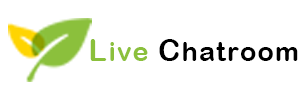
<style>
.page{position:relative;width:300px;height:100px;background:#ffffff}
.page>*{position:absolute;margin:0}
.t1{font:26.7px "ArialRoundedMTBold";letter-spacing:0.05em;color:#000000}
.t2{font:30px "ArialRoundedMTBold";letter-spacing:0.05em;color:#8bc03c}
.t3{font:26.7px "ArialRoundedMTBold";letter-spacing:0.05em;color:#8bc03c}
.t4{font:30px "ArialRoundedMTBold";letter-spacing:0.05em;color:#000000}
</style>
<div class="page">
<p class="t1" style="left:90px;top:39px;width:208px;height:22px"><span class="t2">L</span><span class="t3">ive </span><span class="t4">C</span>hatroom</p>
</div>
